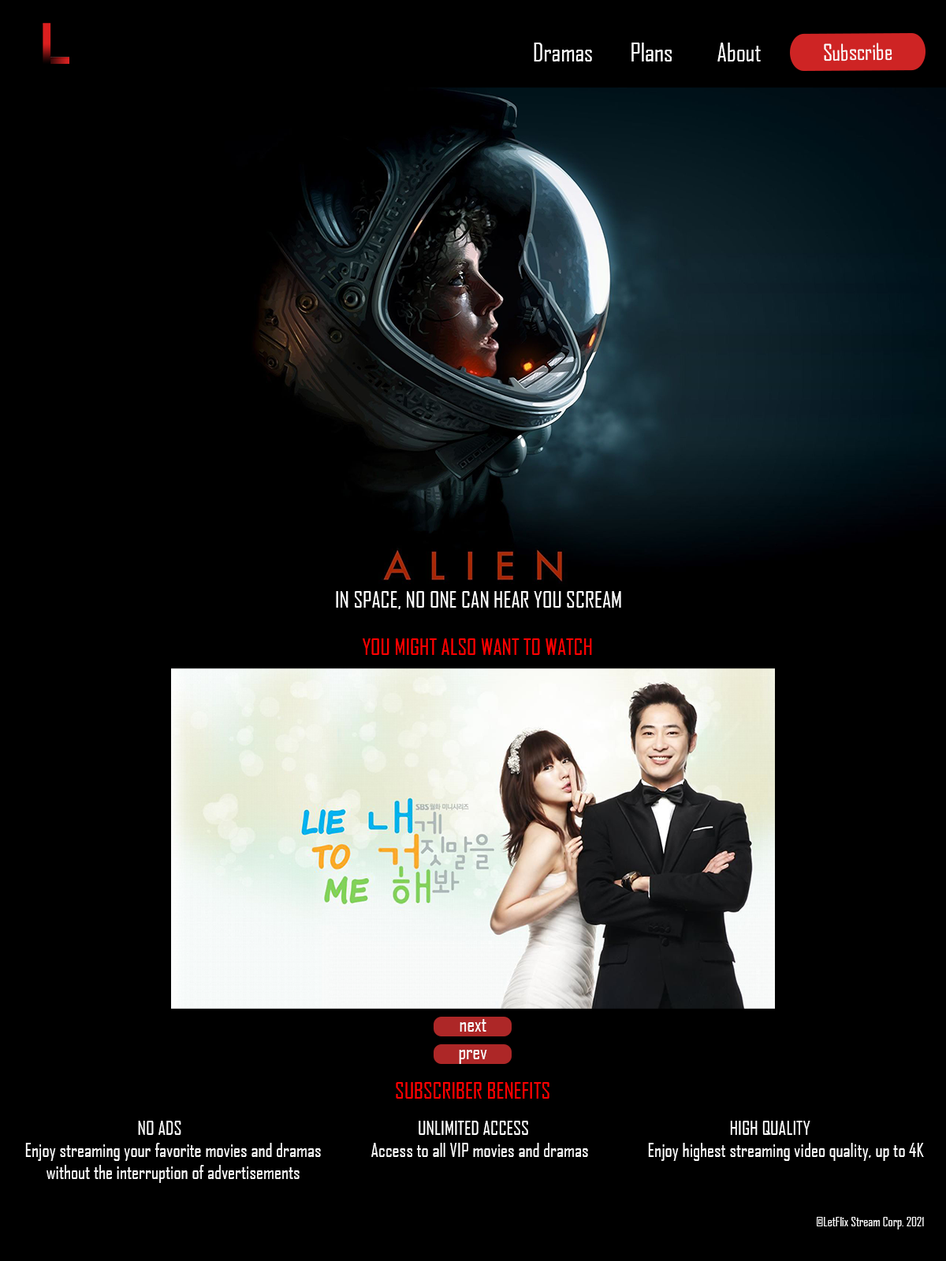
<style>
.page{position:relative;width:946px;height:1261px;background:#000000}
.page>*{position:absolute;margin:0}
.t1{font:24.5px "AgencyFB-Reg";color:#ffffff}
.t2{font:24.9px "AgencyFB-Reg";color:#ffffff}
.t3{font:22px "AgencyFB-Reg";color:#ffffff}
.t4{font:22.1px "AgencyFB-Reg";color:#ffffff}
.t5{font:22.1px "AgencyFB-Reg";color:#ff0000}
.t6{font:20.2px "AgencyFB-Reg";color:#fcfcfc}
.t7{font:18.9px "AgencyFB-Reg";color:#fcfcfc}
.t8{font:18.9px "AgencyFB-Reg";color:#ffffff}
.t9{font:12.6px "AgencyFB-Reg";color:#fcfcfc}
</style>
<div class="page">
<p class="t1" style="left:534px;top:43px;width:58px;height:18px">Dramas</p>
<p class="t2" style="left:631px;top:43px;width:40px;height:18px">Plans</p>
<p class="t1" style="left:717px;top:43px;width:43px;height:18px">About</p>
<p class="t3" style="left:824px;top:43px;width:68px;height:18px;rotate:-1deg">Subscribe</p>
<p class="t4" style="left:336px;top:591px;width:285px;height:18px">IN SPACE, NO ONE CAN HEAR YOU SCREAM</p>
<p class="t5" style="left:363px;top:638px;width:229px;height:17px">YOU MIGHT ALSO WANT TO WATCH</p>
<p class="t6" style="left:459px;top:1019px;width:27px;height:13px">next</p>
<p class="t6" style="left:459px;top:1050px;width:28px;height:14px">prev</p>
<p class="t5" style="left:396px;top:1082px;width:153px;height:17px">SUBSCRIBER BENEFITS</p>
<p class="t7" style="left:138px;top:1121px;width:43px;height:14px">NO ADS</p>
<p class="t8" style="left:418px;top:1121px;width:110px;height:14px">UNLIMITED ACCESS</p>
<p class="t8" style="left:730px;top:1121px;width:80px;height:14px">HIGH QUALITY</p>
<p class="t7" style="left:25px;top:1143px;width:296px;height:40px;text-align:center">Enjoy streaming your favorite movies and dramas without the interruption of advertisements</p>
<p class="t7" style="left:371px;top:1143px;width:217px;height:14px">Access to all VIP movies and dramas</p>
<p class="t7" style="left:648px;top:1143px;width:276px;height:18px">Enjoy highest streaming video quality, up to 4K</p>
<p class="t9" style="left:816px;top:1217px;width:108px;height:12px">©LetFlix Stream Corp. 2021</p>
</div>
